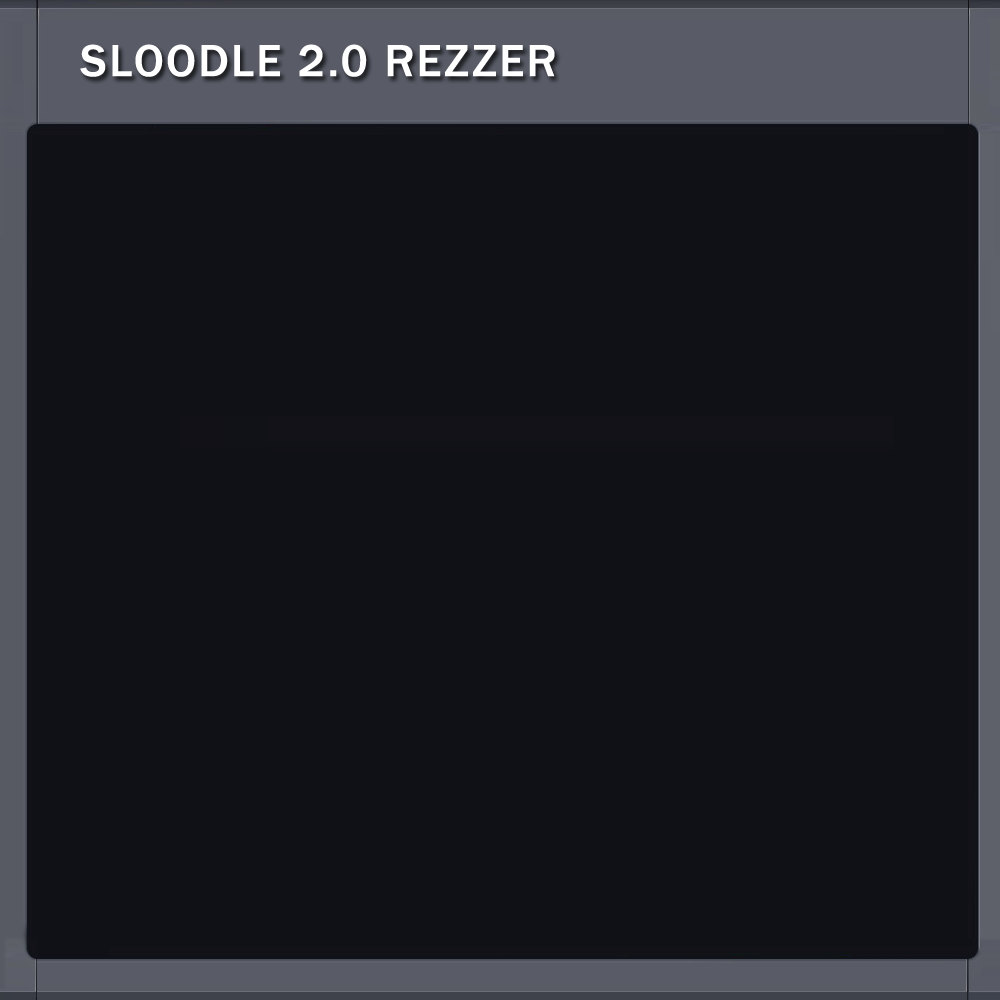
<style>
.page{position:relative;width:1000px;height:1000px;background:#101116}
.page>*{position:absolute;margin:0}
.t1{font:46.6px "FranklinGothic-Medium";letter-spacing:0.025em;color:#ffffff;text-transform:uppercase;font-weight:bold}
</style>
<div class="page">
<p class="t1" style="left:80px;top:44px;width:475px;height:33px">Sloodle 2.0 rezzer</p>
</div>
